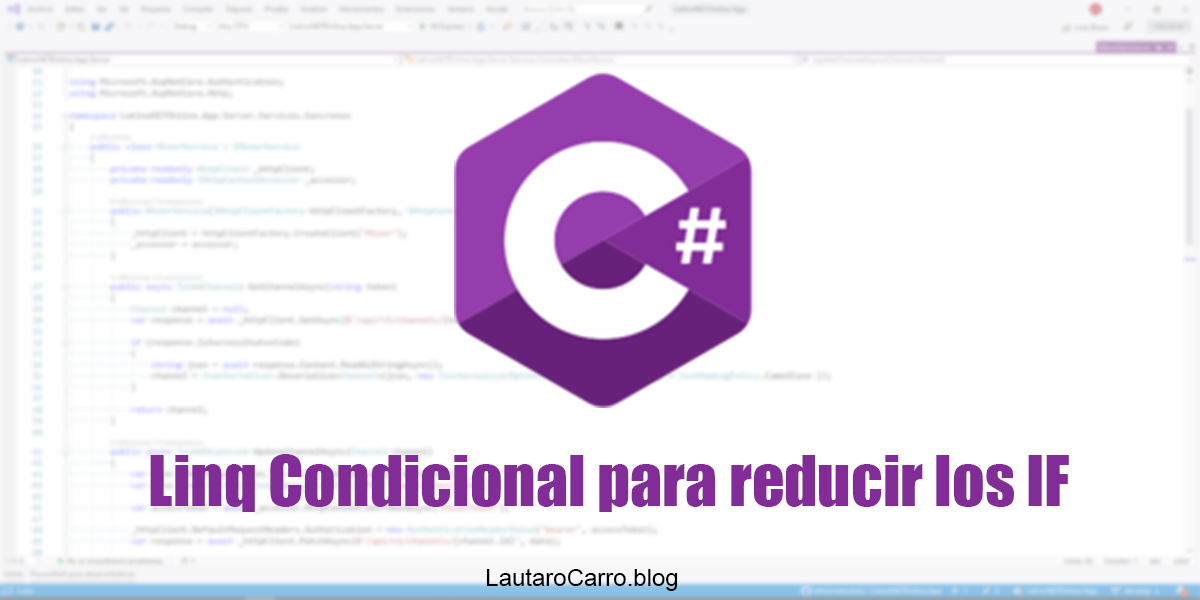
<style>
.page{position:relative;width:1200px;height:600px;background:#ffffff}
.page>*{position:absolute;margin:0}
.t1{font:64px "Impact";color:#822c98}
.t2{font:24px "ArialMT";color:#000000}
</style>
<div class="page">
<p class="t1" style="left:150px;top:454px;width:919px;height:58px">Linq Condicional para reducir los IF</p>
<p class="t2" style="left:486px;top:568px;width:192px;height:23px">LautaroCarro.blog</p>
</div>
